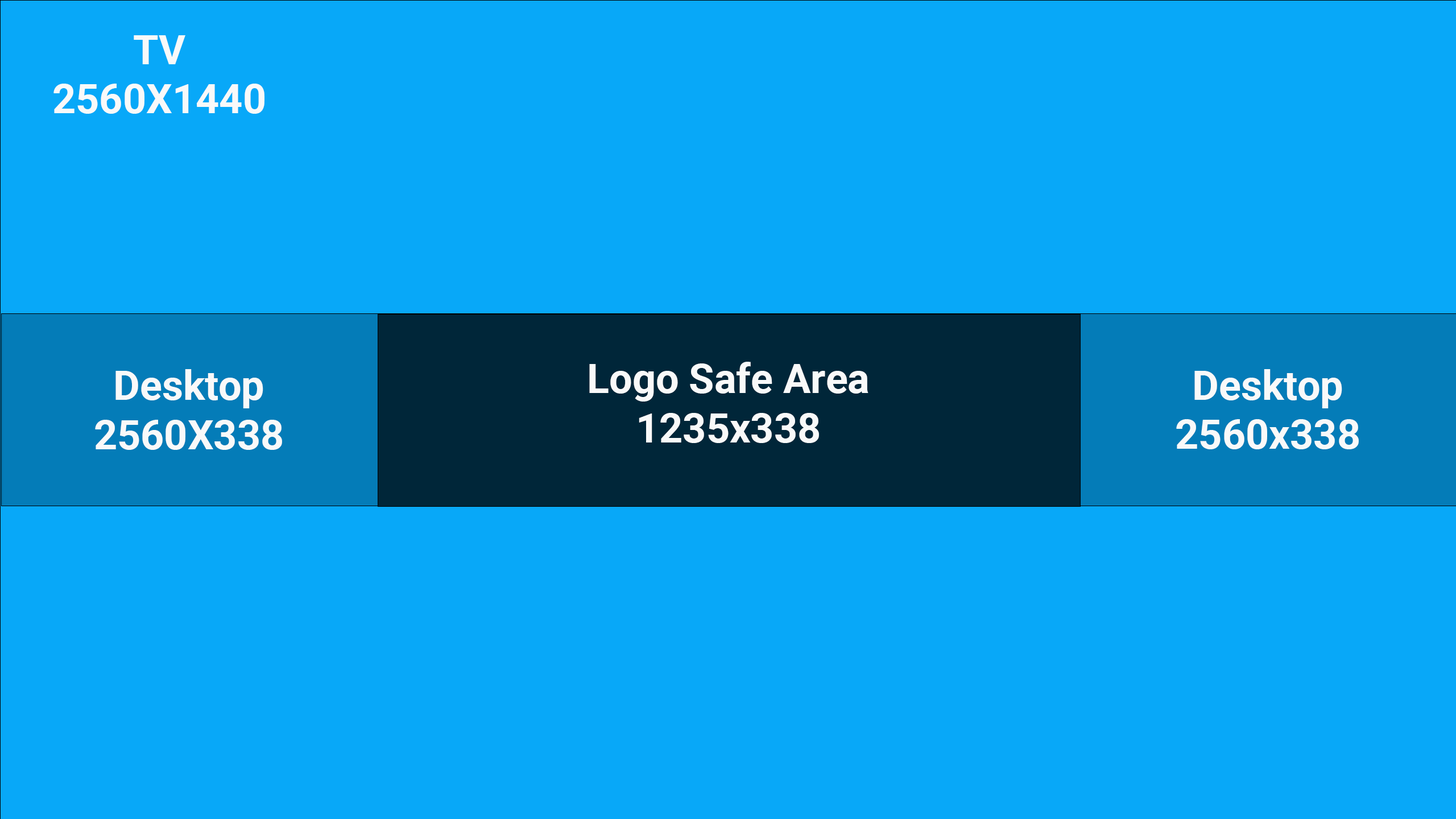
<style>
.page{position:relative;width:1456px;height:819px;background:#08a8f8}
.page>*{position:absolute;margin:0}
.t1{font:40.9px "Roboto-Bold";color:#f9f9f9}
</style>
<div class="page">
<p class="t1" style="left:53px;top:35px;width:211px;height:79px;text-align:center">TV<br>2560X1440</p>
<p class="t1" style="left:589px;top:362px;width:279px;height:81px;text-align:center">Logo Safe Area<br>1235x338</p>
<p class="t1" style="left:95px;top:369px;width:187px;height:81px;text-align:center">Desktop<br>2560X338</p>
<p class="t1" style="left:1176px;top:369px;width:183px;height:80px;text-align:center">Desktop<br>2560x338</p>
</div>
